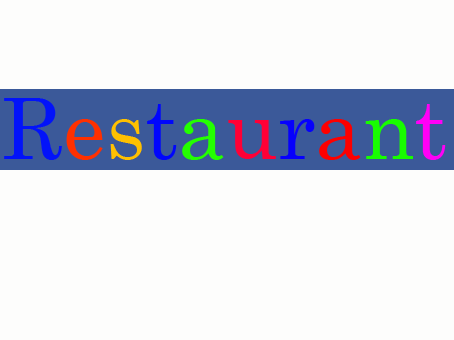
<style>
.page{position:relative;width:454px;height:340px;background:#fdfdfc}
.page>*{position:absolute;margin:0}
.t1{font:85px "CenturySchoolbook";color:#0213f9}
.t2{font:85px "CenturySchoolbook";color:#ff3000}
.t3{font:85px "CenturySchoolbook";color:#ffc000}
.t4{font:85px "CenturySchoolbook";color:#0006fc}
.t5{font:85px "CenturySchoolbook";color:#24ff00}
.t6{font:85px "CenturySchoolbook";color:#ff0036}
.t7{font:85px "CenturySchoolbook";color:#0600fd}
.t8{font:85px "CenturySchoolbook";color:#fd0000}
.t9{font:85px "CenturySchoolbook";color:#18fd00}
.t10{font:85px "CenturySchoolbook";color:#ff00f6}
</style>
<div class="page">
<p class="t1" style="left:4px;top:98px;width:442px;height:62px">R<span class="t2">e</span><span class="t3">s</span><span class="t4">t</span><span class="t5">a</span><span class="t6">u</span><span class="t7">r</span><span class="t8">a</span><span class="t9">n</span><span class="t10">t</span></p>
</div>
